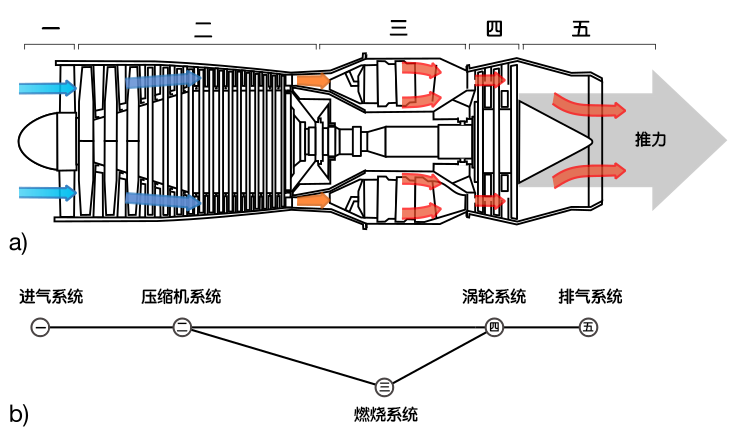
<style>
.page{position:relative;width:732px;height:440px;background:#ffffff}
.page>*{position:absolute;margin:0}
.t1{font:18.7px "STYuanti-SC-Bold";color:#000000}
.t2{font:16px "STYuanti-SC-Bold";color:#000000}
.t3{font:10.7px "STYuanti-SC-Bold";color:#000000}
.t4{font:10.7px "STYuanti-SC-Bold"}
</style>
<div class="page">
<p class="t1" style="left:41px;top:27px;width:19px;height:3px">一</p>
<p class="t1" style="left:194px;top:22px;width:19px;height:16px">二</p>
<p class="t1" style="left:389px;top:20px;width:19px;height:16px">三</p>
<p class="t1" style="left:486px;top:20px;width:16px;height:17px">四</p>
<p class="t1" style="left:572px;top:20px;width:19px;height:17px">五</p>
<p class="t2" style="left:635px;top:131px;width:31px;height:16px">推力</p>
<p class="t2" style="left:19px;top:288px;width:64px;height:16px">进气系统</p>
<p class="t2" style="left:141px;top:288px;width:80px;height:17px">压缩机系统</p>
<p class="t2" style="left:462px;top:288px;width:64px;height:16px">涡轮系统</p>
<p class="t2" style="left:558px;top:288px;width:65px;height:17px">排气系统</p>
<p class="t3" style="left:35px;top:326px;width:12px;height:3px">一</p>
<p class="t3" style="left:176px;top:322px;width:12px;height:10px">二</p>
<p class="t3" style="left:489px;top:322px;width:10px;height:10px">四</p>
<p class="t3" style="left:582px;top:322px;width:12px;height:10px">五</p>
<p class="t4" style="left:379px;top:382px;width:11px;height:10px">三</p>
<p class="t2" style="left:354px;top:406px;width:64px;height:16px">燃烧系统</p>
</div>
